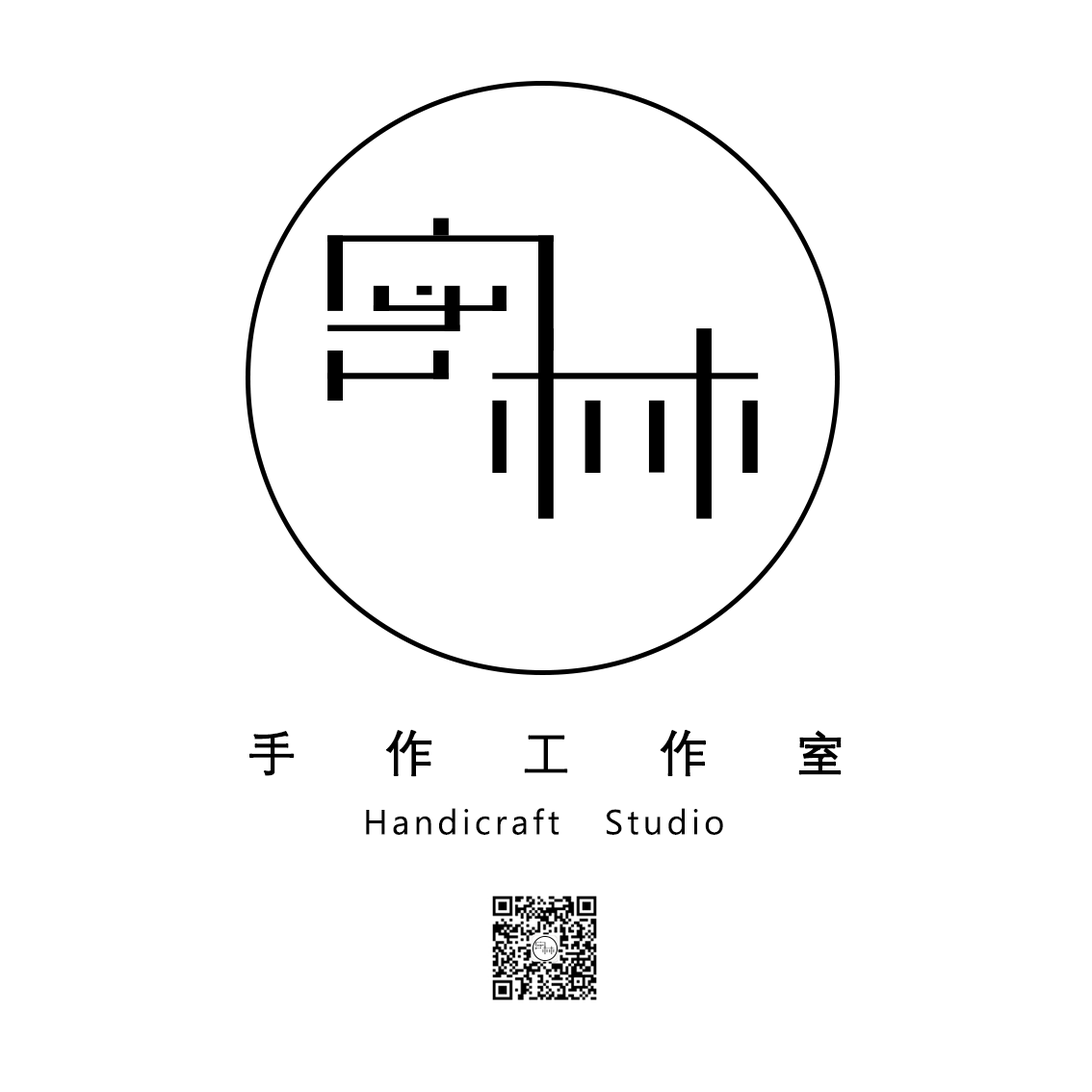
<style>
.page{position:relative;width:1092px;height:1092px;background:#ffffff}
.page>*{position:absolute;margin:0}
.t1{font:48.1px "DengXian-Regular";letter-spacing:1.82em;color:#000000;font-weight:bold}
.t2{font:34.7px "LeelawadeeUI";letter-spacing:0.12em;color:#000000}
</style>
<div class="page">
<p class="t1" style="left:249px;top:729px;width:593px;height:48px">手作工作室</p>
<p class="t2" style="left:366px;top:808px;width:357px;height:27px">Handicraft   Studio</p>
</div>
